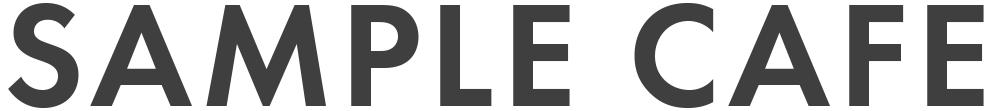
<style>
.page{position:relative;width:1000px;height:111px;background:#ffffff}
.page>*{position:absolute;margin:0}
.t1{font:152.1px "FuturaPT-Demi";letter-spacing:0.05em;color:#3f3f3f}
</style>
<div class="page">
<p class="t1" style="left:8px;top:3px;width:976px;height:106px">SAMPLE CAFE</p>
</div>
